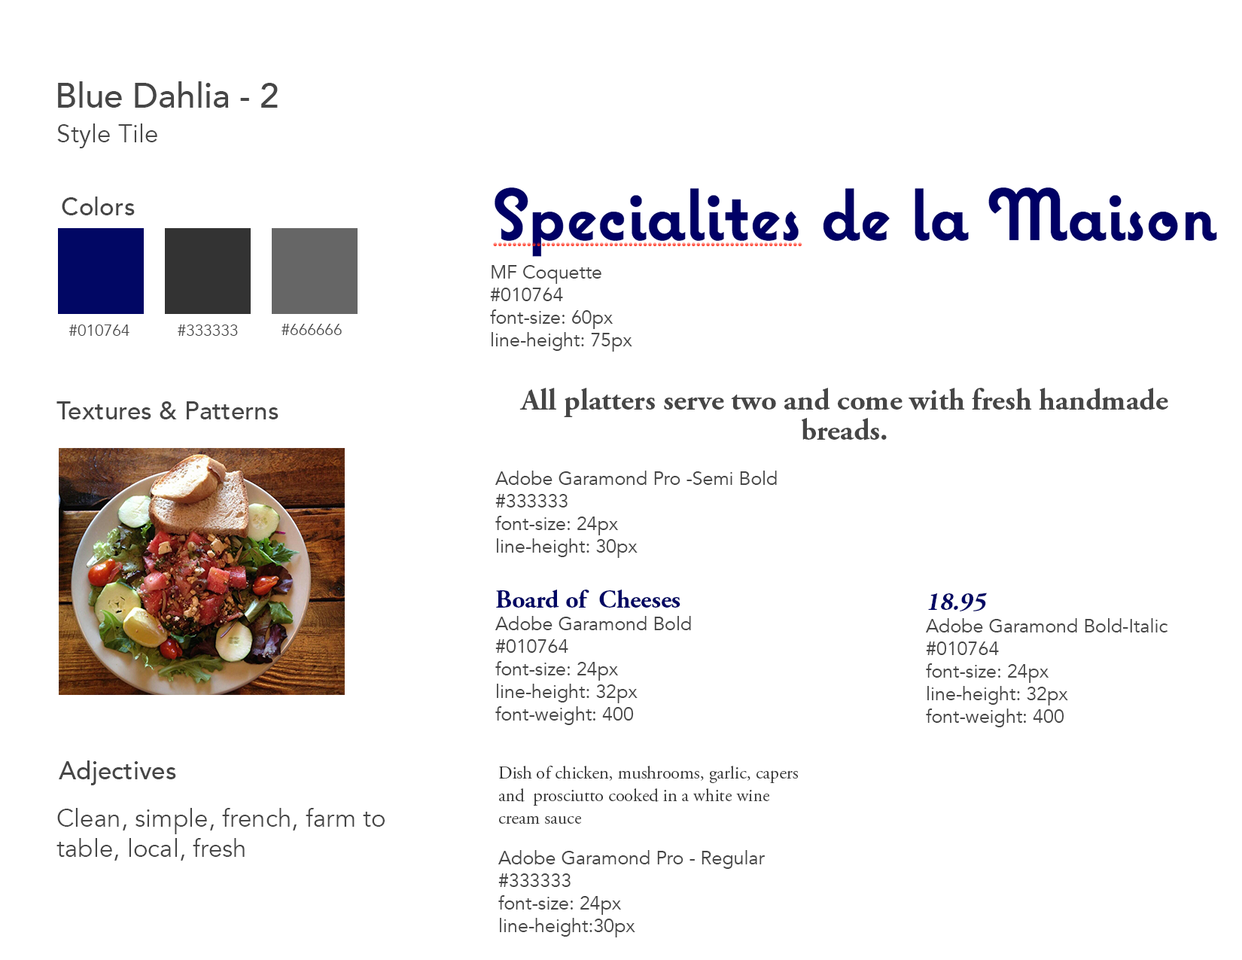
<style>
.page{position:relative;width:1242px;height:960px;background:#ffffff}
.page>*{position:absolute;margin:0}
.t1{font:34.5px "Avenir-Medium";color:#464646}
.t2{font:25.1px "Avenir-Book";color:#464646}
.t3{font:25.1px "Avenir-Medium";color:#464646}
.t4{font:18.8px "Avenir-Book";color:#464646}
.t5{font:15.7px "Avenir-Book";color:#464646}
.t6{font:30.1px/30.1px "AGaramondPro-Bold";color:#464646}
.t7{font:25.6px "AGaramondPro-Bold";color:#010764}
.t8{font:25.6px "AGaramondPro-Bold";color:#010764;font-style:italic}
.t9{font:18.1px/22.6px "AGaramondPro-Regular";color:#333333}
</style>
<div class="page">
<p class="t1" style="left:58px;top:81px;width:220px;height:27px">Blue Dahlia - 2</p>
<p class="t2" style="left:57px;top:123px;width:100px;height:25px">Style Tile</p>
<p class="t3" style="left:62px;top:196px;width:73px;height:19px">Colors</p>
<p class="t4" style="left:490px;top:265px;width:142px;height:87px">MF Coquette<br>#010764<br>font-size: 60px<br>line-height: 75px</p>
<p class="t5" style="left:69px;top:324px;width:60px;height:12px">#010764</p>
<p class="t5" style="left:178px;top:324px;width:60px;height:12px">#333333</p>
<p class="t5" style="left:282px;top:324px;width:60px;height:11px">#666666</p>
<p class="t4" style="left:495px;top:388px;width:673px;height:170px;text-align:center"><span class="t6">All platters serve two and come with fresh handmade breads.<br><br></span>Adobe Garamond Pro -Semi Bold<br>#333333<br>font-size: 24px<br>line-height: 30px<br>font-weight: 600</p>
<p class="t3" style="left:56px;top:401px;width:223px;height:18px">Textures &amp; Patterns</p>
<p class="t4" style="left:495px;top:589px;width:196px;height:136px"><span class="t7">Board of  Cheeses<br></span>Adobe Garamond Bold<br>#010764<br>font-size: 24px<br>line-height: 32px<br>font-weight: 400</p>
<p class="t4" style="left:926px;top:593px;width:242px;height:134px"><span class="t8">18.95<br></span>Adobe Garamond Bold-Italic<br>#010764<br>font-size: 24px<br>line-height: 32px<br>font-weight: 400</p>
<p class="t3" style="left:59px;top:760px;width:117px;height:25px">Adjectives</p>
<p class="t9" style="left:498px;top:766px;width:300px;height:171px">Dish of chicken, mushrooms, garlic, capers and  prosciutto cooked in a white wine cream sauce <br><br><span class="t4">Adobe Garamond Pro - Regular<br>#333333<br>font-size: 24px<br>line-height:30px<br>font-weight: 400</span></p>
<p class="t2" style="left:56px;top:808px;width:329px;height:53px">Clean, simple, french, farm to table, local, fresh</p>
</div>
